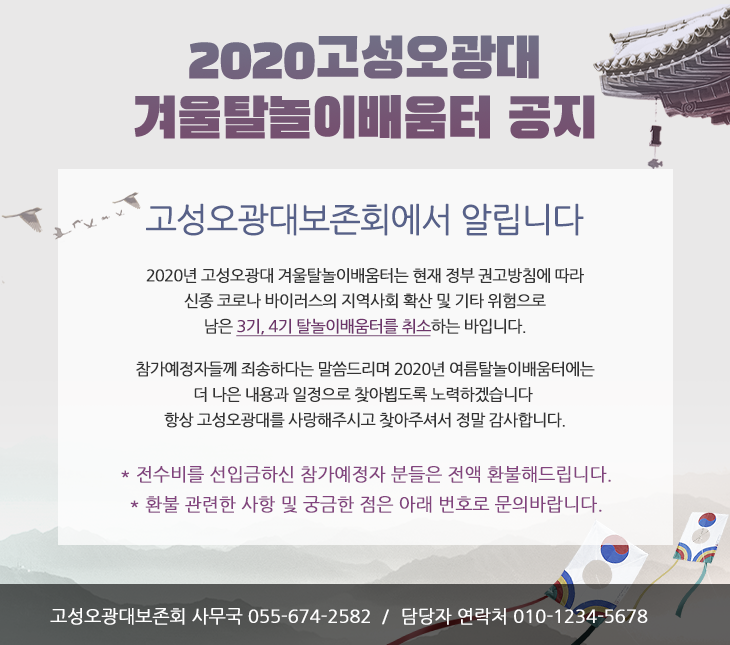
<style>
.page{position:relative;width:730px;height:645px;background:#f9f9f9}
.page>*{position:absolute;margin:0}
.t1{font:56px/60px "BlackHanSans-Regular";letter-spacing:-0.06em;color:#735976;font-weight:bold}
.t2{font:16px/25.5px "NanumGothic";letter-spacing:-0.06em;color:#333333;font-weight:bold}
.t3{font:33.8px/26.5px "NanumGothic";letter-spacing:-0.06em;color:#576189;font-weight:bold}
.t4{font:16px/25.5px "NanumGothic";letter-spacing:-0.06em;color:#6d356a;font-weight:bold;text-decoration:underline}
.t5{font:18.1px/29.8px "NanumGothic";letter-spacing:-0.02em;color:#82447e;font-weight:bold}
.t6{font:18px "NanumGothic";letter-spacing:-0.02em;color:#ffffff;font-weight:bold}
</style>
<div class="page">
<p class="t1" style="left:134px;top:35px;width:461px;height:104px;text-align:center">2020고성오광대<br>겨울탈놀이배움터 공지</p>
<p class="t2" style="left:136px;top:203px;width:459px;height:225px;text-align:center"><span class="t3">고성오광대보존회에서 알립니다<br><br></span>2020년 고성오광대 겨울탈놀이배움터는 현재 정부 권고방침에 따라<br>신종 코로나 바이러스의 지역사회 확산 및 기타 위험으로<br>남은 <span class="t4">3기, 4기 탈놀이배움터를 취소</span>하는 바입니다.<br><br>참가예정자들께 죄송하다는 말씀드리며 2020년 여름탈놀이배움터에는<br>더 나은 내용과 일정으로 찾아뵙도록 노력하겠습니다 <br>항상 고성오광대를 사랑해주시고 찾아주셔서 정말 감사합니다.</p>
<p class="t5" style="left:121px;top:466px;width:490px;height:47px;text-align:center">* 전수비를 선입금하신 참가예정자 분들은 전액 환불해드립니다.<br>* 환불 관련한 사항 및 궁금한 점은 아래 번호로 문의바랍니다.</p>
<p class="t6" style="left:50px;top:608px;width:339px;height:17px">고성오광대보존회 사무국 055-674-2582  /</p>
<p class="t6" style="left:402px;top:608px;width:246px;height:17px">담당자 연락처 010-1234-5678</p>
</div>
